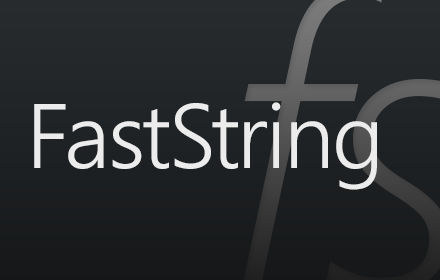
<style>
.page{position:relative;width:440px;height:280px}
.page>*{position:absolute;margin:0}
.t1{font:91.2px "SegoeUI-Semilight";letter-spacing:-0.025em;color:#ececec}
</style>
<div class="page">
<p class="t1" style="left:34px;top:102px;width:343px;height:88px">FastString</p>
</div>
